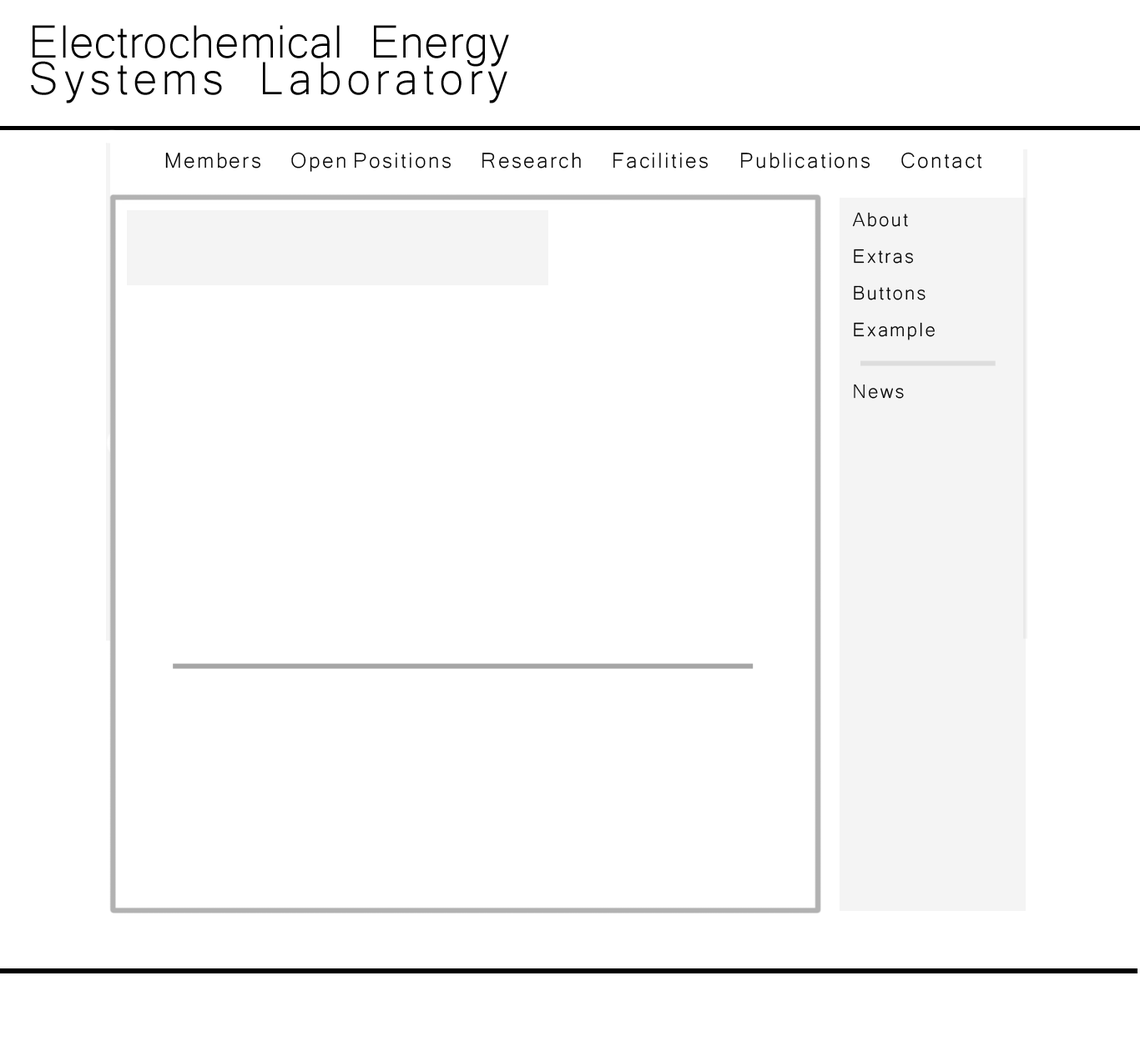
<style>
.page{position:relative;width:1140px;height:1046px;background:#ffffff}
.page>*{position:absolute;margin:0}
.t1{font:60.1px/36.7px "Microsoft-Yi-Baiti";color:#000000}
.t2{font:60.1px/36.7px "Microsoft-Yi-Baiti";letter-spacing:0.07em;color:#000000}
.t3{font:27.5px "Microsoft-Yi-Baiti";letter-spacing:0.07em;color:#000000}
.t4{font:25px/36.7px "Microsoft-Yi-Baiti";letter-spacing:0.07em;color:#000000}
.t5{font:25px "Microsoft-Yi-Baiti";letter-spacing:0.07em;color:#000000}
</style>
<div class="page">
<p class="t1" style="left:31px;top:25px;width:478px;height:78px">Electrochemical Energy <br><span class="t2">Systems Laboratory</span></p>
<p class="t3" style="left:165px;top:152px;width:817px;height:20px">Members  Open Positions  Research  Facilities    Publications  Contact</p>
<p class="t4" style="left:852px;top:212px;width:82px;height:128px">About<br>Extras<br>Buttons<br>Example</p>
<p class="t5" style="left:854px;top:384px;width:50px;height:15px">News</p>
</div>
